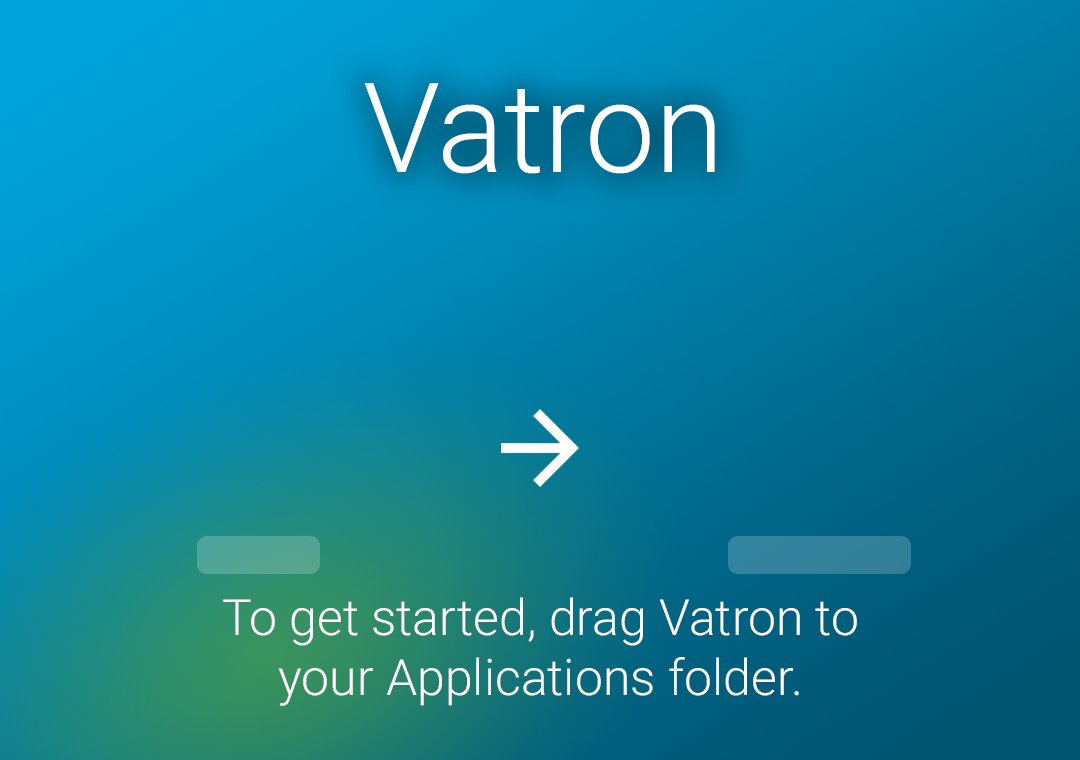
<style>
.page{position:relative;width:1080px;height:760px}
.page>*{position:absolute;margin:0}
.t1{font:125px "Roboto-Light";color:#ffffff}
.t2{font:50px "Roboto-Light";color:#ffffff}
</style>
<div class="page">
<p class="t1" style="left:364px;top:83px;width:351px;height:91px">Vatron</p>
<p class="t2" style="left:223px;top:597px;width:634px;height:109px;text-align:center">To get started, drag Vatron to<br>your Applications folder.</p>
</div>
